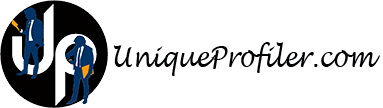
<style>
.page{position:relative;width:383px;height:108px;background:#ffffff}
.page>*{position:absolute;margin:0}
.t1{font:29.2px "LucidaHandwriting-Italic";color:#000102;scale:0.82 1}
</style>
<div class="page">
<p class="t1" style="left:113px;top:42px;width:267px;height:34px">UniqueProfiler.com</p>
</div>
